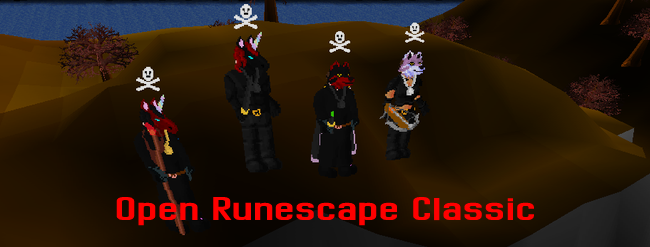
<style>
.page{position:relative;width:650px;height:247px}
.page>*{position:absolute;margin:0}
.t1{font:48px "Dhurjati";color:#ff0000}
</style>
<div class="page">
<p class="t1" style="left:116px;top:197px;width:418px;height:29px">Open Runescape Classic</p>
</div>
